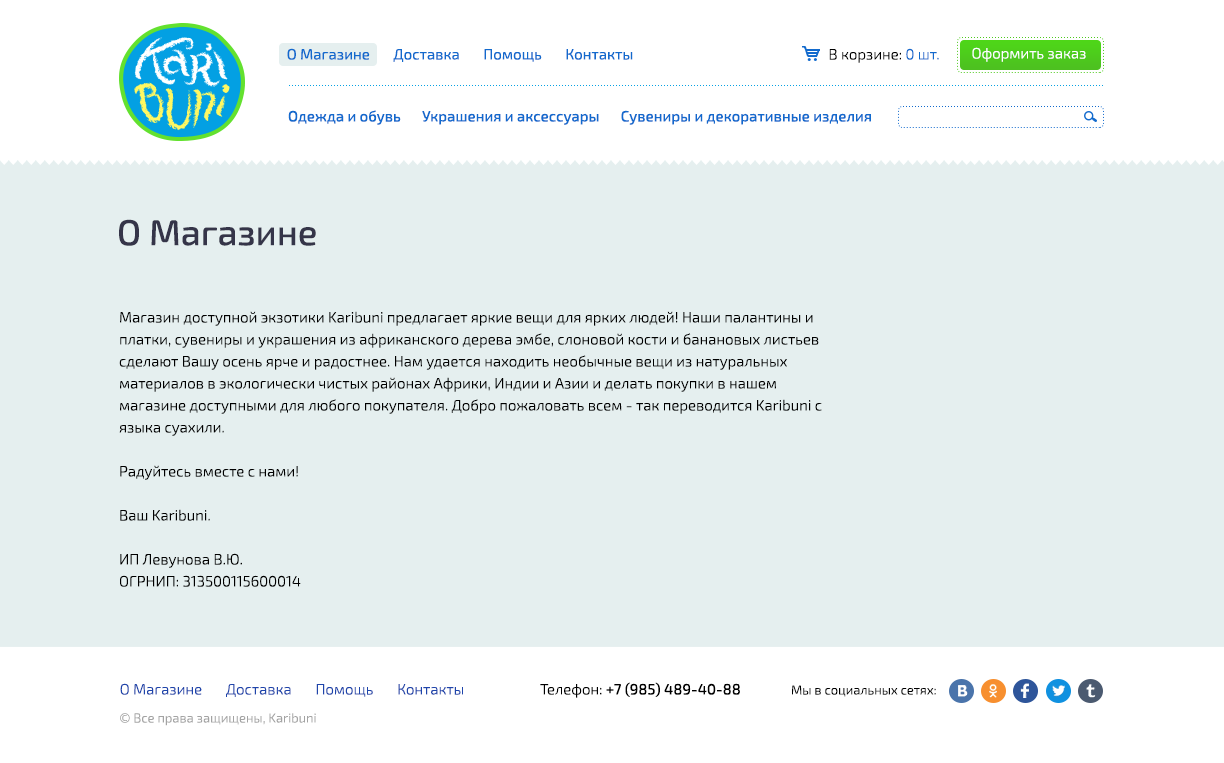
<style>
.page{position:relative;width:1224px;height:763px;background:#e5efef}
.page>*{position:absolute;margin:0}
.t1{font:15px "Exo2-Regular";color:#126acd}
.t2{font:15px "Exo2-Light";color:#000000}
.t3{font:15px "Exo2-Light";color:#126acd}
.t4{font:15px "Exo2-Light";color:#ffffff}
.t5{font:15px "Exo2-Medium";color:#126acd}
.t6{font:36px "Exo2-Medium";color:#353549}
.t7{font:15px/22px "Exo2-Light";color:#000000}
.t8{font:15px "Exo2-Light";color:#1e45ab}
.t9{font:15px "Exo2-Medium";color:#000000}
.t10{font:13px "Exo2-Light";color:#000000}
.t11{font:13px "Exo2-Light";color:#a3a3a3}
</style>
<div class="page">
<p class="t1" style="left:287px;top:48px;width:346px;height:14px">О Магазине       Доставка       Помощь       Контакты</p>
<p class="t2" style="left:829px;top:48px;width:110px;height:15px">В корзине: <span class="t3">0 шт.</span></p>
<p class="t4" style="left:972px;top:47px;width:114px;height:15px">Оформить заказ</p>
<p class="t5" style="left:288px;top:110px;width:583px;height:15px">Одежда и обувь       Украшения и аксессуары       Сувениры и декоративные изделия</p>
<p class="t6" style="left:119px;top:219px;width:197px;height:27px">О Магазине</p>
<p class="t7" style="left:119px;top:311px;width:703px;height:276px">Магазин доступной экзотики Karibuni предлагает яркие вещи для ярких людей! Наши палантины и платки, сувениры и украшения из африканского дерева эмбе, слоновой кости и банановых листьев сделают Вашу осень ярче и радостнее. Нам удается находить необычные вещи из натуральных материалов в экологически чистых районах Африки, Индии и Азии и делать покупки в нашем магазине доступными для любого покупателя. Добро пожаловать всем - так переводится Karibuni с языка суахили. <br><br>Радуйтесь вместе с нами!<br><br>Ваш Karibuni.<br><br>ИП Левунова В.Ю.<br>ОГРНИП: 313500115600014</p>
<p class="t8" style="left:120px;top:683px;width:343px;height:14px">О Магазине       Доставка       Помощь       Контакты</p>
<p class="t9" style="left:540px;top:682px;width:200px;height:16px"><span class="t2">Телефон: </span>+7 (985) 489-40-88</p>
<p class="t10" style="left:792px;top:685px;width:144px;height:12px">Мы в социальных сетях:</p>
<p class="t11" style="left:120px;top:713px;width:196px;height:13px">© Все права защищены, Karibuni</p>
</div>
